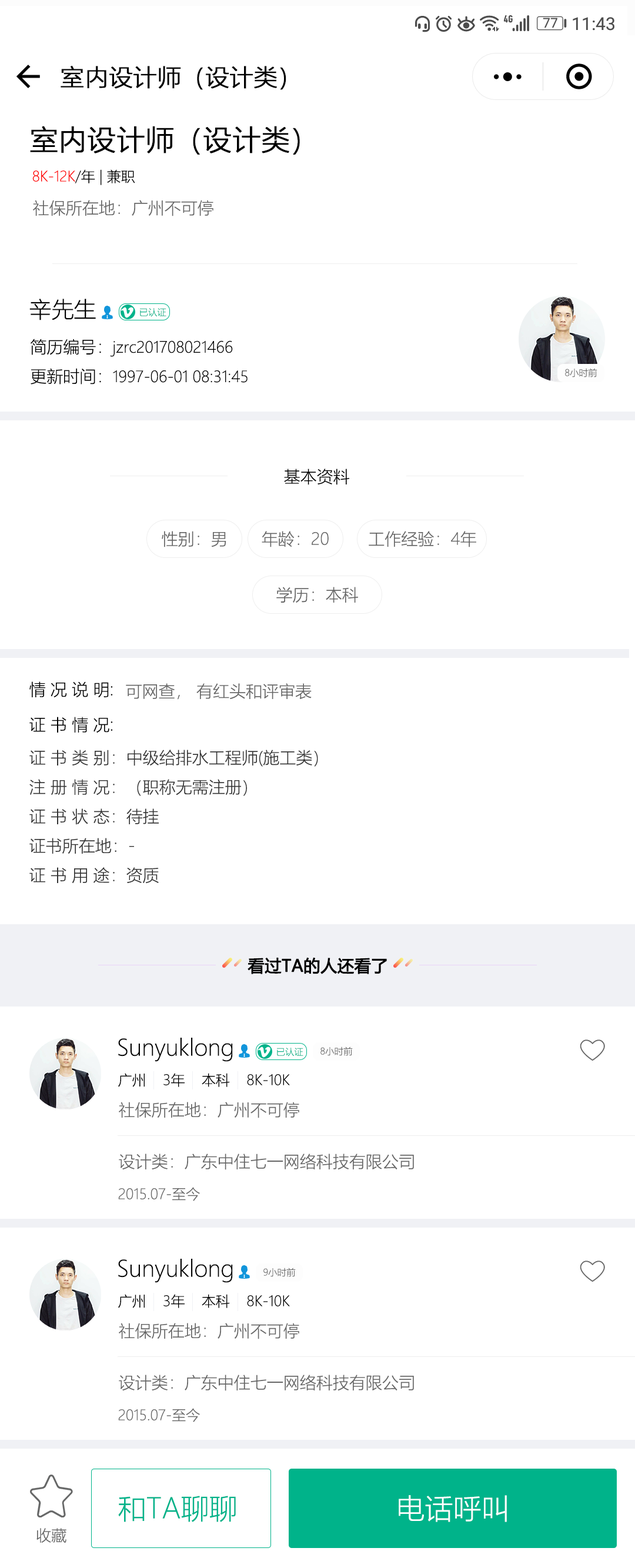
<style>
.page{position:relative;width:635px;height:1568px;background:#ffffff}
.page>*{position:absolute;margin:0}
.t1{font:23.5px "MicrosoftYaHeiLight";color:#010101;font-weight:bold}
.t2{font:28.2px "MicrosoftYaHeiLight";color:#010101;font-weight:bold}
.t3{font:14.1px "MicrosoftYaHeiLight";color:#000000}
.t4{font:14.1px "MicrosoftYaHeiLight";color:#ff0000}
.t5{font:16.5px "MicrosoftYaHeiLight";color:#666666}
.t6{font:22.3px "MicrosoftYaHeiLight";color:#040404}
.t7{font:9.1px "MicrosoftYaHeiLight";color:#00b38a}
.t8{font:15.3px/29.5px "MicrosoftYaHeiLight";color:#000000}
.t9{font:16.5px/29.5px "MicrosoftYaHeiLight";color:#000000}
.t10{font:9.1px "MicrosoftYaHeiLight";color:#666666}
.t11{font:16.5px "MicrosoftYaHeiLight";color:#000000}
.t12{font:16.5px/29.4px "MicrosoftYaHeiLight";color:#333333}
.t13{font:16.5px "MicrosoftYaHei";color:#000000;font-weight:bold}
.t14{font:14.1px "MicrosoftYaHeiLight";color:#666666}
.t15{font:28.2px "MicrosoftYaHeiLight";color:#00b38a}
.t16{font:28.2px "MicrosoftYaHeiLight";color:#ffffff}
.t17{font:15.3px "MicrosoftYaHeiLight";color:#666666}
</style>
<div class="page">
<p class="t1" style="left:61px;top:66px;width:225px;height:24px">室内设计师（设计类）</p>
<p class="t2" style="left:30px;top:126px;width:270px;height:29px">室内设计师（设计类）</p>
<p class="t3" style="left:32px;top:169px;width:103px;height:16px"><span class="t4">8K-12K</span>/年 | 兼职</p>
<p class="t5" style="left:33px;top:200px;width:180px;height:16px">社保所在地：广州不可停</p>
<p class="t6" style="left:29px;top:299px;width:67px;height:21px">辛先生</p>
<p class="t7" style="left:140px;top:308px;width:26px;height:9px">已认证</p>
<p class="t8" style="left:31px;top:339px;width:217px;height:46px"><span class="t9">简历编号：</span>jzrc201708021466<br><span class="t9">更新时间：</span>1997-06-01 08:31:45</p>
<p class="t10" style="left:565px;top:368px;width:32px;height:9px">8小时前</p>
<p class="t11" style="left:284px;top:469px;width:65px;height:16px">基本资料</p>
<p class="t5" style="left:162px;top:531px;width:314px;height:16px">性别：男       年龄：20        工作经验：4年</p>
<p class="t5" style="left:276px;top:587px;width:82px;height:16px">学历：本科</p>
<p class="t11" style="left:29px;top:681px;width:84px;height:17px">情 况 说 明:</p>
<p class="t5" style="left:126px;top:683px;width:186px;height:17px">可网查， 有红头和评审表</p>
<p class="t11" style="left:29px;top:717px;width:84px;height:16px">证 书 情 况:</p>
<p class="t12" style="left:29px;top:750px;width:289px;height:134px">证 书 类 别：中级给排水工程师(施工类）<br>注 册 情 况：（职称无需注册）<br>证 书 状 态：待挂<br>证书所在地：-<br>证 书 用 途：资质</p>
<p class="t13" style="left:248px;top:957px;width:139px;height:17px">看过TA的人还看了</p>
<p class="t6" style="left:118px;top:1038px;width:115px;height:24px">Sunyuklong</p>
<p class="t7" style="left:277px;top:1048px;width:26px;height:9px">已认证</p>
<p class="t10" style="left:320px;top:1047px;width:33px;height:9px">8小时前</p>
<p class="t3" style="left:118px;top:1073px;width:172px;height:14px">广州    3年    本科    8K-10K</p>
<p class="t5" style="left:119px;top:1102px;width:180px;height:16px">社保所在地：广州不可停</p>
<p class="t5" style="left:119px;top:1154px;width:295px;height:16px">设计类：广东中住七一网络科技有限公司</p>
<p class="t14" style="left:118px;top:1187px;width:82px;height:14px">2015.07-至今</p>
<p class="t6" style="left:118px;top:1259px;width:115px;height:24px">Sunyuklong</p>
<p class="t10" style="left:263px;top:1268px;width:33px;height:9px">9小时前</p>
<p class="t3" style="left:118px;top:1294px;width:172px;height:14px">广州    3年    本科    8K-10K</p>
<p class="t5" style="left:119px;top:1323px;width:180px;height:16px">社保所在地：广州不可停</p>
<p class="t5" style="left:119px;top:1375px;width:295px;height:16px">设计类：广东中住七一网络科技有限公司</p>
<p class="t14" style="left:118px;top:1408px;width:82px;height:14px">2015.07-至今</p>
<p class="t15" style="left:118px;top:1496px;width:118px;height:26px">和TA聊聊</p>
<p class="t16" style="left:399px;top:1495px;width:108px;height:27px">电话呼叫</p>
<p class="t17" style="left:36px;top:1528px;width:30px;height:15px">收藏</p>
</div>
